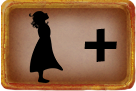
<style>
.page{position:relative;width:136px;height:91px}
.page>*{position:absolute;margin:0}
.t1{font:83.3px "Acme-Regular";color:#000000}
</style>
<div class="page">
<p class="t1" style="left:84px;top:28px;width:33px;height:34px">+</p>
</div>
